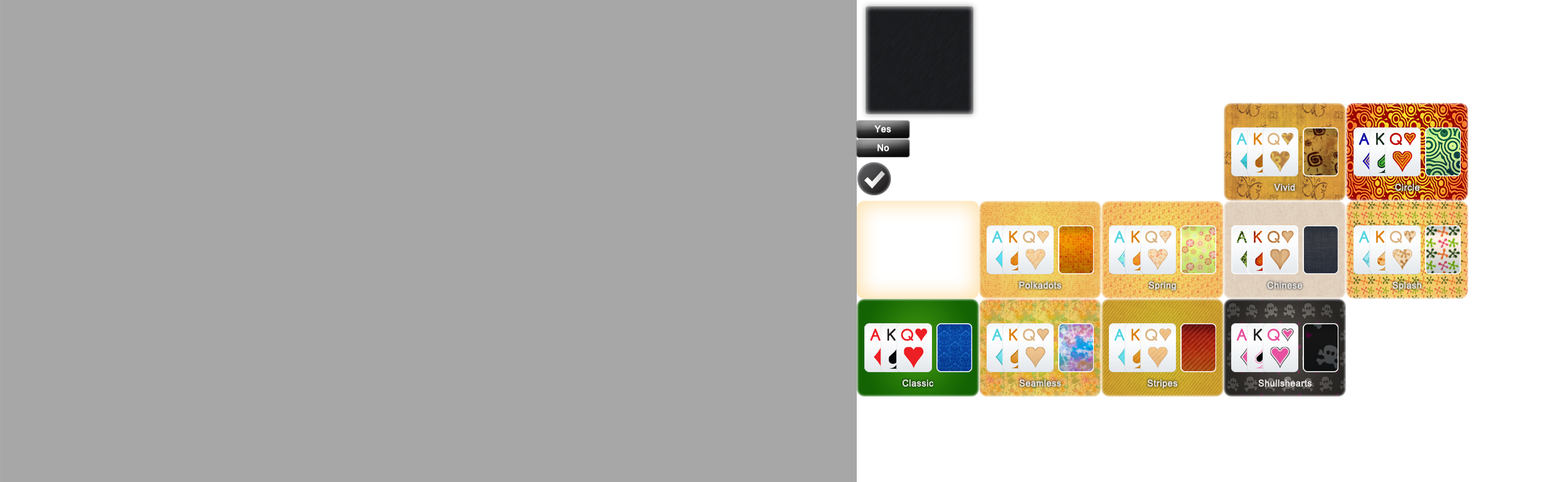
<style>
.page{position:relative;width:1568px;height:482px;background:#a7a7a7}
.page>*{position:absolute;margin:0}
.t1{font:9.3px "ArialMT";letter-spacing:0.025em;color:#ffffff;font-weight:bold;scale:0.95 1}
.t2{font:9.3px "ArialMT";letter-spacing:0.025em;color:#ffffff;font-weight:bold;scale:0.96 1}
.t3{font:9.2px "ArialMT";letter-spacing:0.025em;color:#e6e6e6;font-weight:bold;scale:0.95 1}
</style>
<div class="page">
<p class="t1" style="left:874px;top:125px;width:17px;height:7px">Yes</p>
<p class="t2" style="left:877px;top:144px;width:12px;height:7px">No</p>
<p class="t3" style="left:1274px;top:183px;width:21px;height:8px">Vivid</p>
<p class="t3" style="left:1395px;top:183px;width:25px;height:8px">Circle</p>
<p class="t3" style="left:1019px;top:281px;width:42px;height:8px">Polkadots</p>
<p class="t3" style="left:1148px;top:281px;width:28px;height:9px">Spring</p>
<p class="t3" style="left:1267px;top:281px;width:35px;height:8px">Chinese</p>
<p class="t3" style="left:1392px;top:281px;width:29px;height:9px">Splash</p>
<p class="t3" style="left:903px;top:379px;width:31px;height:7px">Classic</p>
<p class="t3" style="left:1019px;top:379px;width:42px;height:7px">Seamless</p>
<p class="t3" style="left:1147px;top:379px;width:31px;height:9px">Stripes</p>
<p class="t3" style="left:1258px;top:379px;width:54px;height:7px">Shullshearts</p>
</div>
